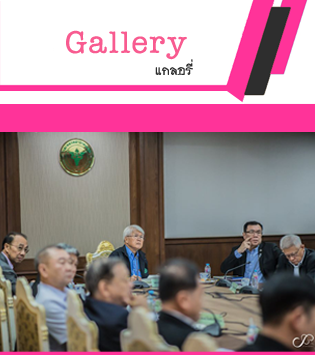
<style>
.page{position:relative;width:315px;height:355px;background:#ffffff}
.page>*{position:absolute;margin:0}
.t1{font:45.1px "DSNDuSit";color:#f85b90}
.t2{font:18.2px "DSNDuSit";color:#2e2e2e}
</style>
<div class="page">
<p class="t1" style="left:66px;top:30px;width:121px;height:30px">Gallery</p>
<p class="t2" style="left:155px;top:59px;width:38px;height:16px">แกลอรี่</p>
</div>
